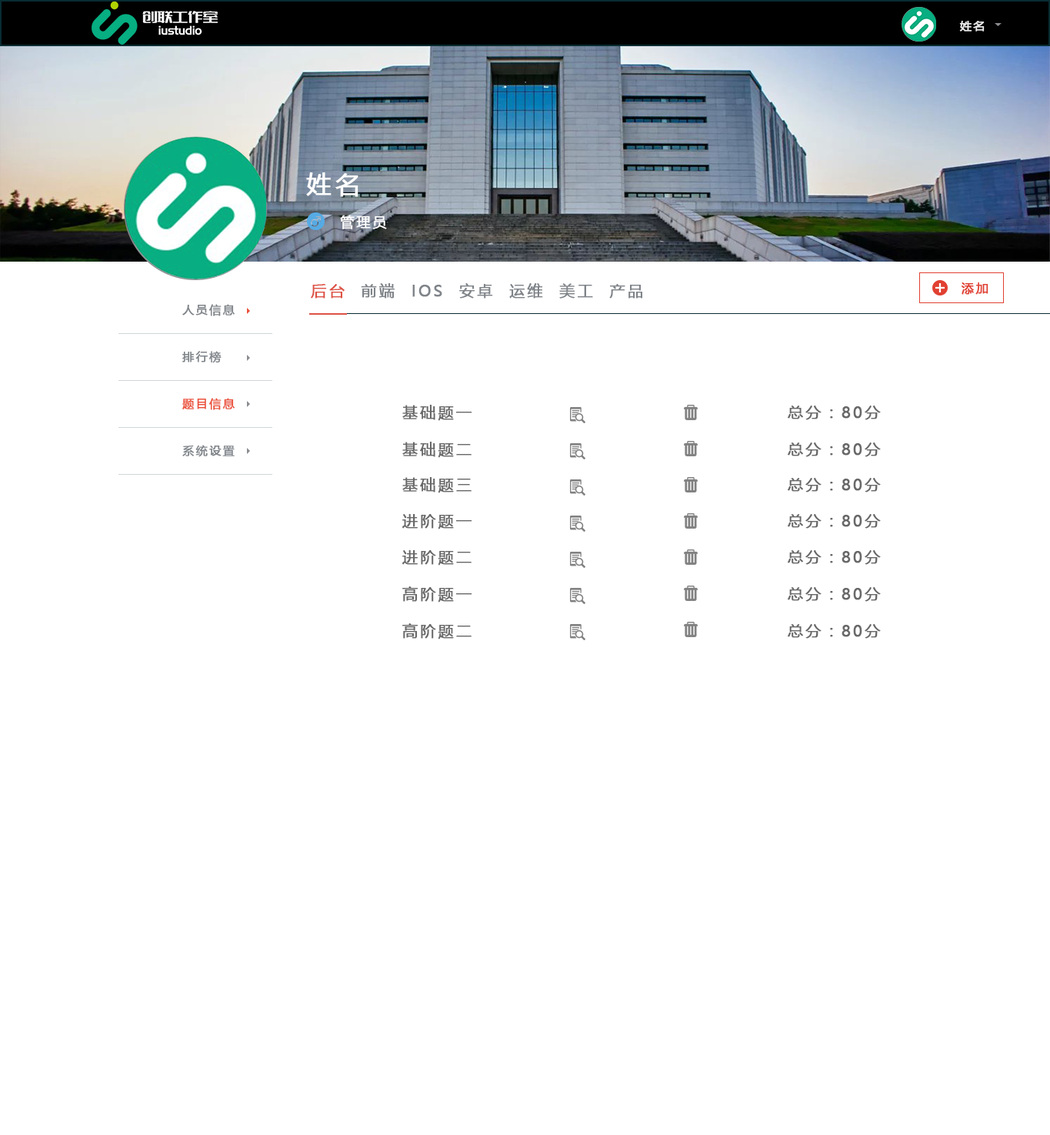
<style>
.page{position:relative;width:1050px;height:1135px;background:#ffffff}
.page>*{position:absolute;margin:0}
.t1{font:11.5px "MicrosoftYaHei";letter-spacing:0.14em;color:#eaeaea;font-weight:bold}
.t2{font:24.6px "MicrosoftYaHei";letter-spacing:0.14em;color:#ffffff;font-weight:bold}
.t3{font:13.9px "MicrosoftYaHei";letter-spacing:0.14em;color:#ffffff;font-weight:bold}
.t4{font:15.4px "MicrosoftYaHei";letter-spacing:0.14em;color:#7f8489;font-weight:bold}
.t5{font:15.4px "MicrosoftYaHei";letter-spacing:0.14em;color:#dd5245;font-weight:bold}
.t6{font:12.3px "MicrosoftYaHei";letter-spacing:0.14em;color:#e14031;font-weight:bold}
.t7{font:11.5px/47px "MicrosoftYaHei";letter-spacing:0.14em;color:#7f8489;font-weight:bold}
.t8{font:11.5px/47px "MicrosoftYaHei";letter-spacing:0.14em;color:#eb4f38;font-weight:bold}
.t9{font:15.4px "MicrosoftYaHei";letter-spacing:0.14em;color:#696969;font-weight:bold}
</style>
<div class="page">
<p class="t1" style="left:960px;top:21px;width:25px;height:11px">姓名</p>
<p class="t2" style="left:306px;top:172px;width:53px;height:25px">姓名</p>
<p class="t3" style="left:340px;top:215px;width:47px;height:14px">管理员</p>
<p class="t4" style="left:311px;top:283px;width:332px;height:16px"><span class="t5">后台  </span>前端  IOS  安卓  运维  美工  产品</p>
<p class="t6" style="left:962px;top:282px;width:27px;height:13px">添加</p>
<p class="t7" style="left:182px;top:304px;width:53px;height:153px">人员信息<br>排行榜<br><span class="t8">题目信息<br></span>系统设置<br>a</p>
<p class="t9" style="left:402px;top:405px;width:71px;height:16px">基础题一</p>
<p class="t9" style="left:788px;top:406px;width:93px;height:14px">总分：80分</p>
<p class="t9" style="left:402px;top:442px;width:70px;height:16px">基础题二</p>
<p class="t9" style="left:788px;top:443px;width:93px;height:14px">总分：80分</p>
<p class="t9" style="left:402px;top:477px;width:70px;height:16px">基础题三</p>
<p class="t9" style="left:788px;top:478px;width:93px;height:15px">总分：80分</p>
<p class="t9" style="left:402px;top:514px;width:71px;height:15px">进阶题一</p>
<p class="t9" style="left:788px;top:514px;width:93px;height:15px">总分：80分</p>
<p class="t9" style="left:402px;top:550px;width:70px;height:16px">进阶题二</p>
<p class="t9" style="left:788px;top:550px;width:93px;height:15px">总分：80分</p>
<p class="t9" style="left:402px;top:586px;width:71px;height:17px">高阶题一</p>
<p class="t9" style="left:788px;top:587px;width:93px;height:15px">总分：80分</p>
<p class="t9" style="left:402px;top:623px;width:70px;height:17px">高阶题二</p>
<p class="t9" style="left:788px;top:624px;width:93px;height:15px">总分：80分</p>
</div>
